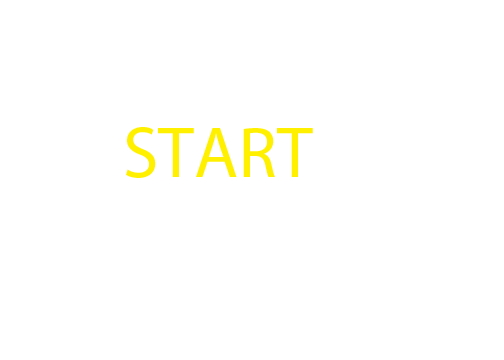
<style>
.page{position:relative;width:504px;height:360px;background:#ffffff}
.page>*{position:absolute;margin:0}
.t1{font:72px "MyriadPro-Regular";color:#fff000}
</style>
<div class="page">
<p class="t1" style="left:126px;top:127px;width:187px;height:51px">START</p>
</div>
